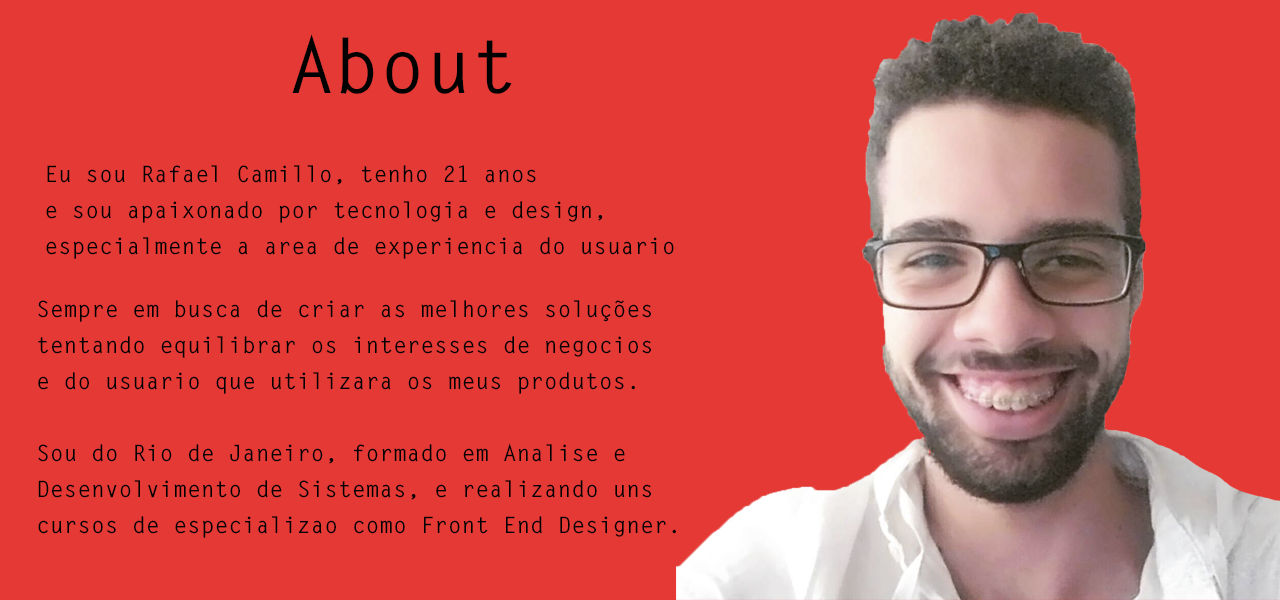
<style>
.page{position:relative;width:1280px;height:600px;background:#e53935}
.page>*{position:absolute;margin:0}
.t1{font:75px "LetterGothicStd-Bold";letter-spacing:0.01em;color:#000000}
.t2{font:22.5px/36px "LetterGothicStd-Bold";letter-spacing:0.01em;color:#000000}
</style>
<div class="page">
<p class="t1" style="left:292px;top:34px;width:220px;height:60px">About</p>
<p class="t2" style="left:46px;top:165px;width:628px;height:94px">Eu sou Rafael Camillo, tenho 21 anos<br>e sou apaixonado por tecnologia e design,<br>especialmente a area de experiencia do usuario</p>
<p class="t2" style="left:38px;top:300px;width:638px;height:238px">Sempre em busca de criar as melhores soluções<br>tentando equilibrar os interesses de negocios<br>e do usuario que utilizara os meus produtos.<br><br>Sou do Rio de Janeiro, formado em Analise e <br>Desenvolvimento de Sistemas, e realizando uns<br>cursos de especializao como Front End Designer.</p>
</div>
